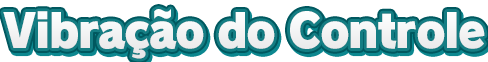
<style>
.page{position:relative;width:488px;height:62px;background:#ffffff}
.page>*{position:absolute;margin:0}
.t1{font:46.7px "RodinPro-UB";letter-spacing:-0.031em;color:#f2f3f3;scale:0.94 1}
</style>
<div class="page">
<p class="t1" style="left:3px;top:9px;width:482px;height:50px">Vibração do Controle</p>
</div>
